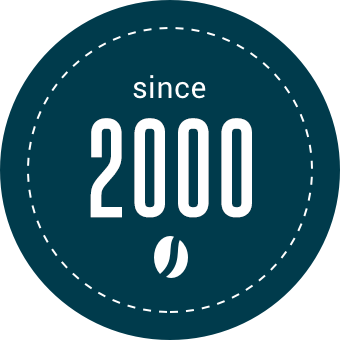
<style>
.page{position:relative;width:340px;height:340px;background:#003b4c}
.page>*{position:absolute;margin:0}
.t1{font:145.3px "AmstoniaSans";color:#ffffff}
</style>
<div class="page">
<p class="t1" style="left:90px;top:118px;width:162px;height:100px">2000</p>
</div>
